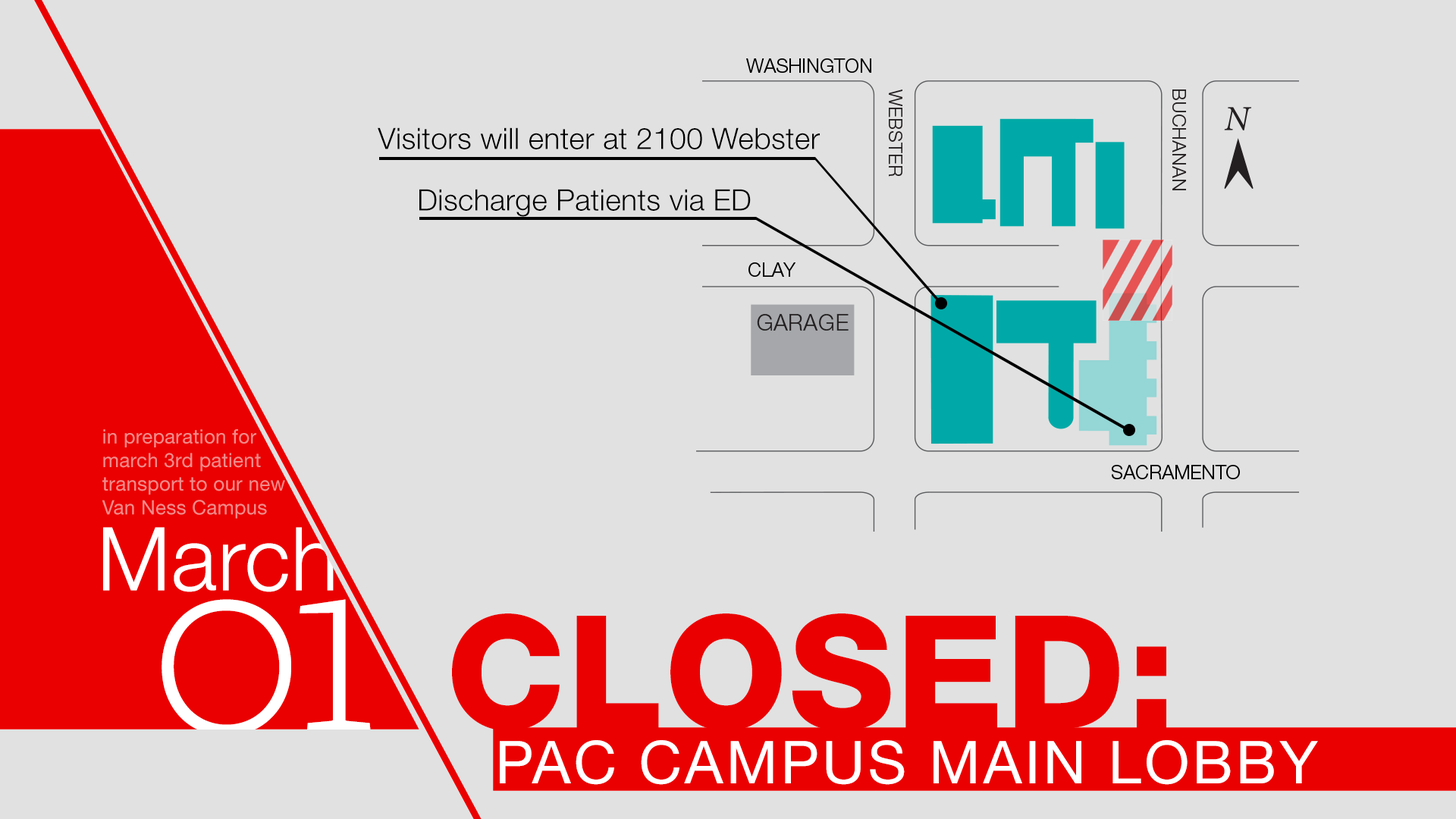
<style>
.page{position:relative;width:1456px;height:819px;background:#e1e1e1}
.page>*{position:absolute;margin:0}
.t1{font:29.6px "HelveticaNeueLTStd-Lt";letter-spacing:0.01em;color:#000000}
.t2{font:19.7px "HelveticaNeueLTStd-Roman";letter-spacing:0.01em;color:#f28a8a}
.t3{font:87.9px "HelveticaNeueLTStd-Lt";letter-spacing:0.01em;color:#ffffff}
.t4{font:273.4px "FreightTextProLight-Regular";letter-spacing:0.01em;color:#ffffff}
.t5{font:157.7px "HelveticaNeueLTStd-Hv";letter-spacing:0.01em;color:#ea0000;text-transform:uppercase}
.t6{font:59.3px "HelveticaNeueLTStd-Roman";letter-spacing:0.05em;color:#ffffff;text-transform:uppercase}
</style>
<div class="page">
<p class="t1" style="left:378px;top:127px;width:442px;height:22px">Visitors will enter at 2100 Webster</p>
<p class="t1" style="left:419px;top:189px;width:332px;height:28px">Discharge Patients via ED</p>
<p class="t2" style="left:102px;top:429px;width:183px;height:90px">in preparation for <br>march 3rd patient<br>transport to our new<br>Van Ness Campus</p>
<p class="t3" style="left:103px;top:527px;width:231px;height:65px">March</p>
<p class="t4" style="left:162px;top:599px;width:209px;height:137px">01</p>
<p class="t5" style="left:452px;top:613px;width:714px;height:118px">closed:</p>
<p class="t6" style="left:500px;top:740px;width:818px;height:45px">PAC Campus Main Lobby</p>
</div>
